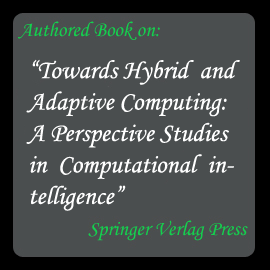
<style>
.page{position:relative;width:270px;height:270px;background:#4a4e4f}
.page>*{position:absolute;margin:0}
.t1{font:26.2px "MonotypeCorsiva";color:#ffffff}
</style>
<div class="page">
<p class="t1" style="left:26px;top:59px;width:214px;height:152px">“Towards Hybrid  and Adaptive Computing: A Perspective Studies in  Computational  intelligence”</p>
</div>
